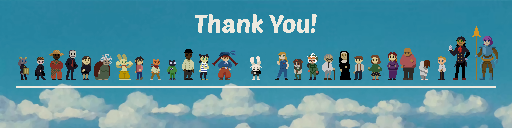
<style>
.page{position:relative;width:512px;height:128px}
.page>*{position:absolute;margin:0}
.t1{font:24px "PoetsenOne-Regular";color:#edeadf}
</style>
<div class="page">
<p class="t1" style="left:195px;top:14px;width:122px;height:19px">Thank You!</p>
</div>
